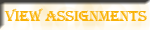
<style>
.page{position:relative;width:150px;height:30px}
.page>*{position:absolute;margin:0}
.t1{font:15px "Algerian";letter-spacing:-0.025em;color:#f9b207;scale:1.08 1}
</style>
<div class="page">
<p class="t1" style="left:4px;top:8px;width:143px;height:13px">VIEW ASSIGNMENTS</p>
</div>
